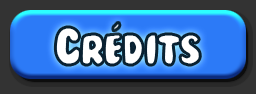
<style>
.page{position:relative;width:256px;height:94px;background:#333333}
.page>*{position:absolute;margin:0}
.t1{font:41px "BubbleGum";letter-spacing:-0.035em;color:#ffffff}
.t2{font:49.1px "BubbleGum";letter-spacing:-0.035em;color:#ffffff}
</style>
<div class="page">
<p class="t1" style="left:55px;top:27px;width:146px;height:38px"><span class="t2">C</span>redits</p>
</div>
